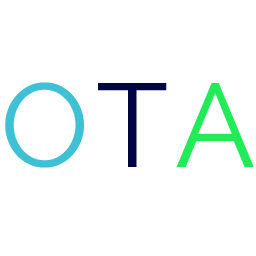
<style>
.page{position:relative;width:256px;height:256px;background:#ffffff}
.page>*{position:absolute;margin:0}
.t1{font:117.6px "Raleway";letter-spacing:0.06em;color:#3ec1d5}
.t2{font:117.6px "Raleway";letter-spacing:0.06em;color:#000444}
.t3{font:117.6px "Raleway";letter-spacing:0.06em;color:#21eb57}
</style>
<div class="page">
<p class="t1" style="left:5px;top:82px;width:249px;height:86px">O<span class="t2">T</span><span class="t3">A</span></p>
</div>
